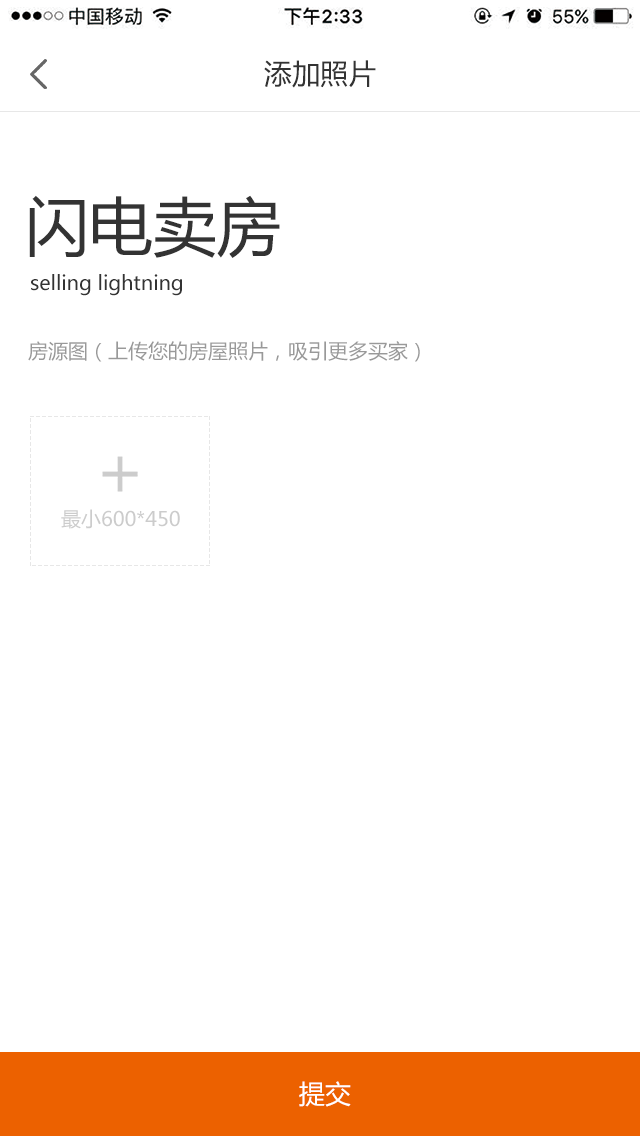
<style>
.page{position:relative;width:640px;height:1136px;background:#ffffff}
.page>*{position:absolute;margin:0}
.t1{font:28px "MicrosoftYaHei";color:#333333}
.t2{font:64px "MicrosoftYaHei";color:#333333}
.t3{font:20px "MicrosoftYaHei";color:#333333}
.t4{font:20px "MicrosoftYaHei";color:#999999}
.t5{font:20px "MicrosoftYaHei";color:#cccccc}
.t6{font:26px "MicrosoftYaHei";color:#ffffff}
</style>
<div class="page">
<p class="t1" style="left:264px;top:60px;width:112px;height:28px">添加照片</p>
<p class="t2" style="left:29px;top:195px;width:251px;height:63px">闪电卖房</p>
<p class="t3" style="left:31px;top:274px;width:151px;height:22px">selling lightning</p>
<p class="t4" style="left:28px;top:341px;width:392px;height:21px">房源图（上传您的房屋照片，吸引更多买家）</p>
<p class="t5" style="left:61px;top:509px;width:119px;height:20px">最小600*450</p>
<p class="t6" style="left:299px;top:1081px;width:52px;height:26px">提交</p>
</div>
